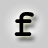
<style>
.page{position:relative;width:48px;height:48px;background:#cccccc}
.page>*{position:absolute;margin:0}
.t1{font:38px "CourierNewPS-BoldMT";color:#000000}
</style>
<div class="page">
<p class="t1" style="left:14px;top:12px;width:20px;height:24px">f</p>
</div>
